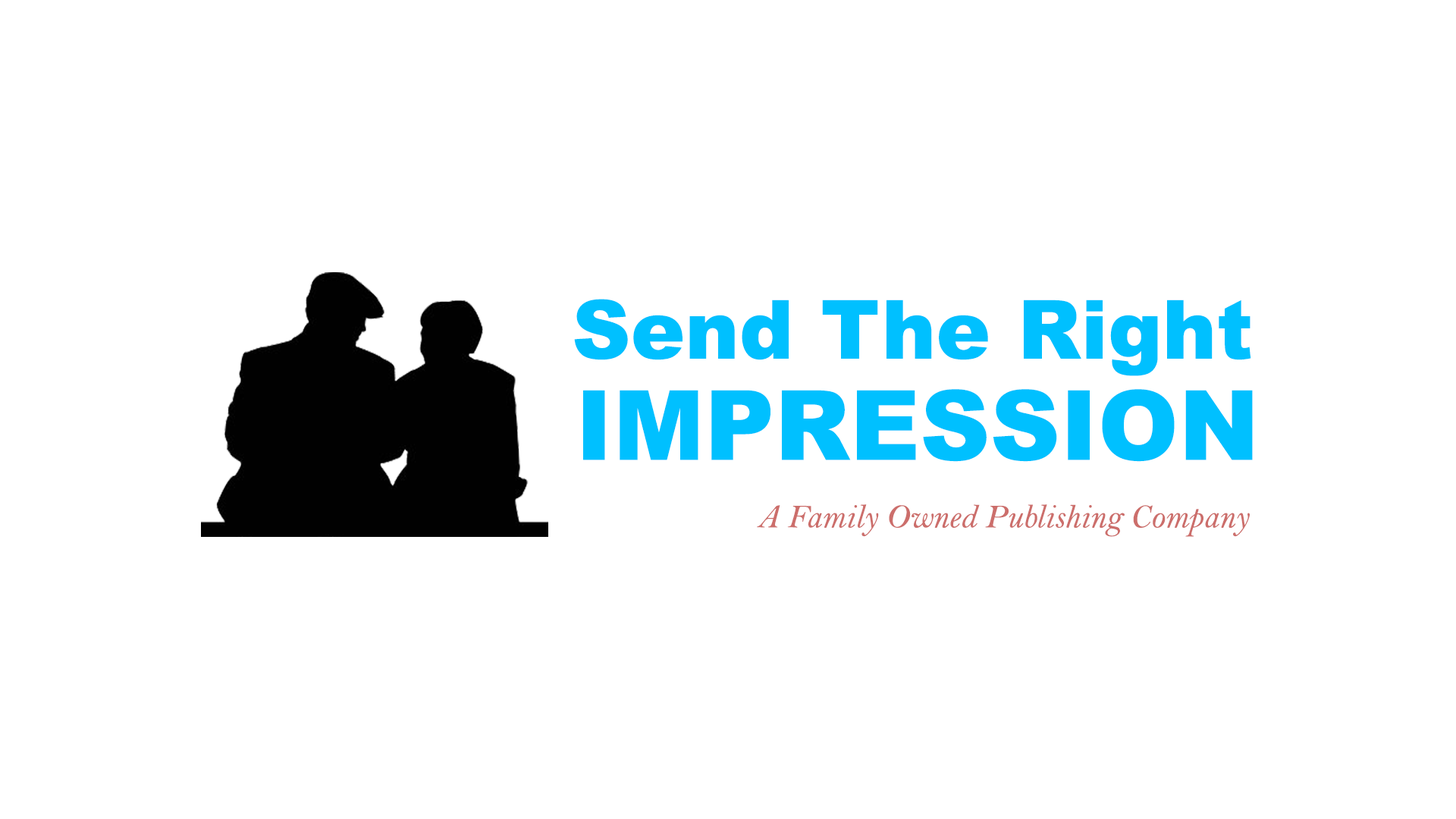
<style>
.page{position:relative;width:1456px;height:819px;background:#ffffff}
.page>*{position:absolute;margin:0}
.t1{font:81.4px "Arial-Black";color:#00c0ff}
.t2{font:97px "Arial-Black";color:#00c0ff}
.t3{font:33.9px "BellMTItalic";color:#cc6e6b}
</style>
<div class="page">
<p class="t1" style="left:574px;top:299px;width:677px;height:77px">Send The Right</p>
<p class="t2" style="left:583px;top:389px;width:670px;height:73px">IMPRESSION</p>
<p class="t3" style="left:757px;top:504px;width:493px;height:33px">A Family Owned Publishing Company</p>
</div>
